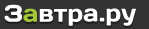
<style>
.page{position:relative;width:149px;height:29px;background:#333333}
.page>*{position:absolute;margin:0}
.t1{font:24px "Days";color:#feffff}
.t2{font:24px "Days";color:#a4c639}
</style>
<div class="page">
<p class="t1" style="left:4px;top:4px;width:132px;height:22px">З<span class="t2">а</span>втра.ру</p>
</div>
